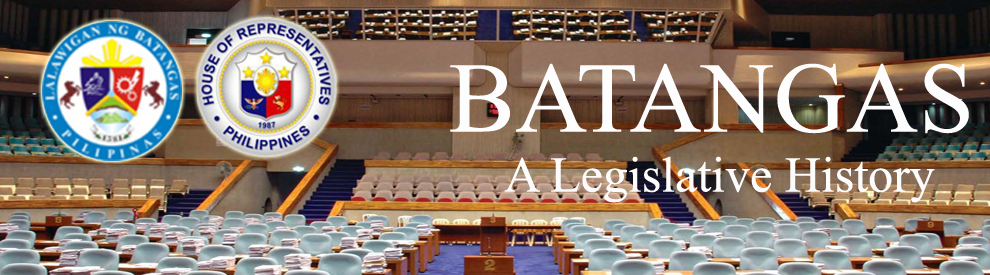
<style>
.page{position:relative;width:990px;height:275px}
.page>*{position:absolute;margin:0}
.t1{font:50px "TimesNewRomanPSMT";color:#fdfcfc}
.t2{font:100px "TimesNewRomanPSMT";color:#fdfdfd}
</style>
<div class="page">
<p class="t1" style="left:450px;top:63px;width:519px;height:140px;text-align:center"><span class="t2">BATANGAS<br></span>A Legislative History</p>
</div>
